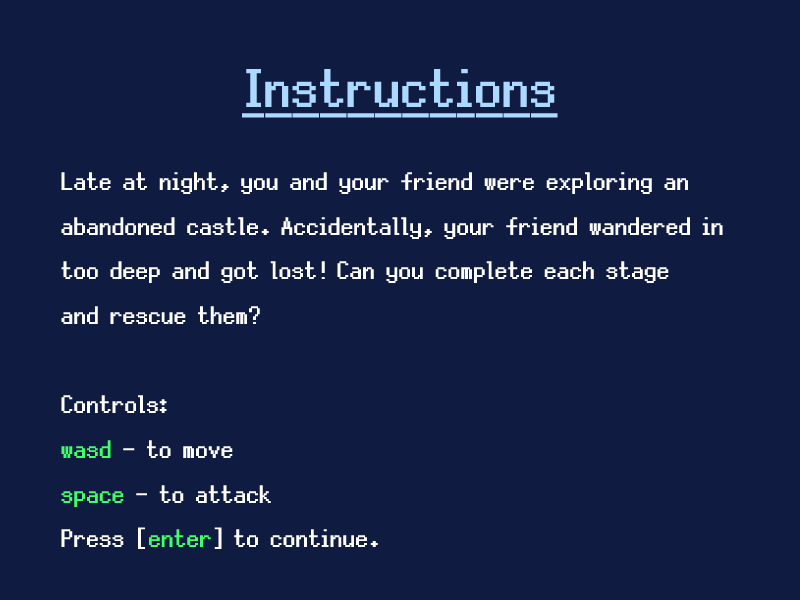
<style>
.page{position:relative;width:800px;height:600px;background:#101b41}
.page>*{position:absolute;margin:0}
.t1{font:80px "Silver";color:#acd9ff;font-weight:bold;text-decoration:underline}
.t2{font:37.2px "Silver";color:#ffffff;font-weight:bold}
.t3{font:37.2px "Silver";color:#41ff6a;font-weight:bold}
</style>
<div class="page">
<p class="t1" style="left:241px;top:69px;width:317px;height:49px">Instructions</p>
<p class="t2" style="left:61px;top:172px;width:662px;height:377px">Late at night, you and your friend were exploring an<br>abandoned castle. Accidentally, your friend wandered in<br>too deep and got lost! Can you complete each stage <br>and rescue them?<br><br>Controls: <br><span class="t3">wasd </span>- to move<br><span class="t3">space </span>- to attack<br>Press [<span class="t3">enter</span>] to continue.</p>
</div>
